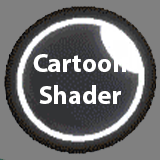
<style>
.page{position:relative;width:160px;height:160px;background:#808080}
.page>*{position:absolute;margin:0}
.t1{font:26.4px "MyriadPro-Bold";color:#ffffff}
</style>
<div class="page">
<p class="t1" style="left:33px;top:54px;width:93px;height:50px;text-align:center">Cartoon<br>Shader</p>
</div>
